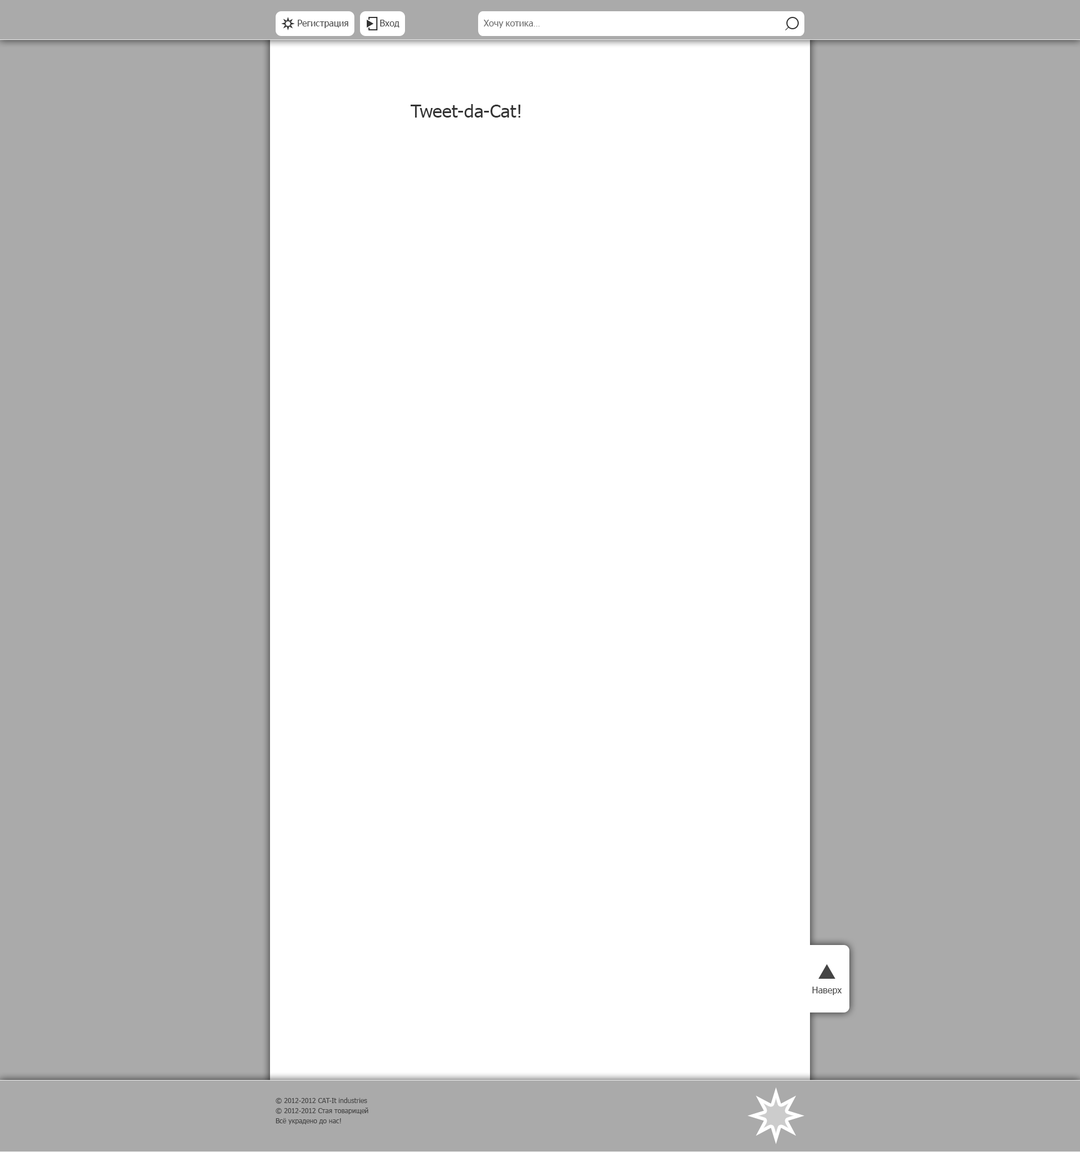
<style>
.page{position:relative;width:1080px;height:1152px;background:#aaaaaa}
.page>*{position:absolute;margin:0}
.t1{font:9px "Tahoma";color:#444444}
.t2{font:9px "Tahoma";color:#666666}
.t3{font:9px "TempusSansITC";color:#666666}
.t4{font:18px "Tahoma";color:#333333}
.t5{font:6.8px/10.1px "Tahoma";color:#444444}
</style>
<div class="page">
<p class="t1" style="left:298px;top:20px;width:50px;height:8px">Регистрация</p>
<p class="t1" style="left:380px;top:20px;width:19px;height:8px">Вход</p>
<p class="t2" style="left:484px;top:20px;width:55px;height:8px">Хочу котика<span class="t3">...</span></p>
<p class="t4" style="left:411px;top:104px;width:109px;height:14px">Tweet-da-Cat!</p>
<p class="t1" style="left:812px;top:987px;width:30px;height:8px">Наверх</p>
<p class="t5" style="left:276px;top:1097px;width:92px;height:27px">© 2012-2012 CAT-It industries<br>© 2012-2012 Стая товарищей<br>Всё украдено до нас!</p>
</div>
